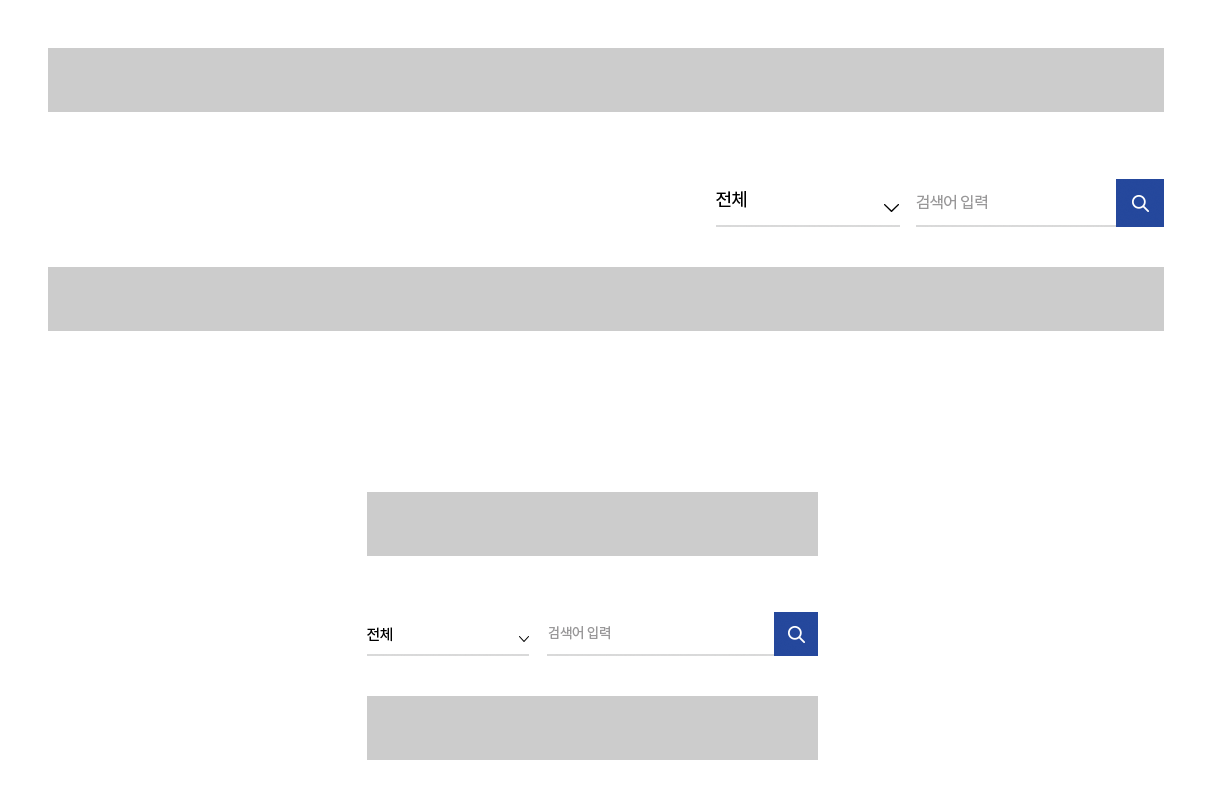
<style>
.page{position:relative;width:1212px;height:812px;background:#ffffff}
.page>*{position:absolute;margin:0}
.t1{font:18px "NotoSansKR-Regular";letter-spacing:-0.05em;color:#000000}
.t2{font:16px "NotoSansKR-Regular";letter-spacing:-0.05em;color:#999899}
.t3{font:15px "NotoSansKR-Regular";letter-spacing:-0.05em;color:#000000}
.t4{font:14px "NotoSansKR-Regular";letter-spacing:-0.05em;color:#999899}
</style>
<div class="page">
<p class="t1" style="left:716px;top:191px;width:30px;height:17px">전체</p>
<p class="t2" style="left:916px;top:194px;width:71px;height:16px">검색어 입력</p>
<p class="t3" style="left:367px;top:627px;width:25px;height:15px">전체</p>
<p class="t4" style="left:548px;top:626px;width:62px;height:14px">검색어 입력</p>
</div>
